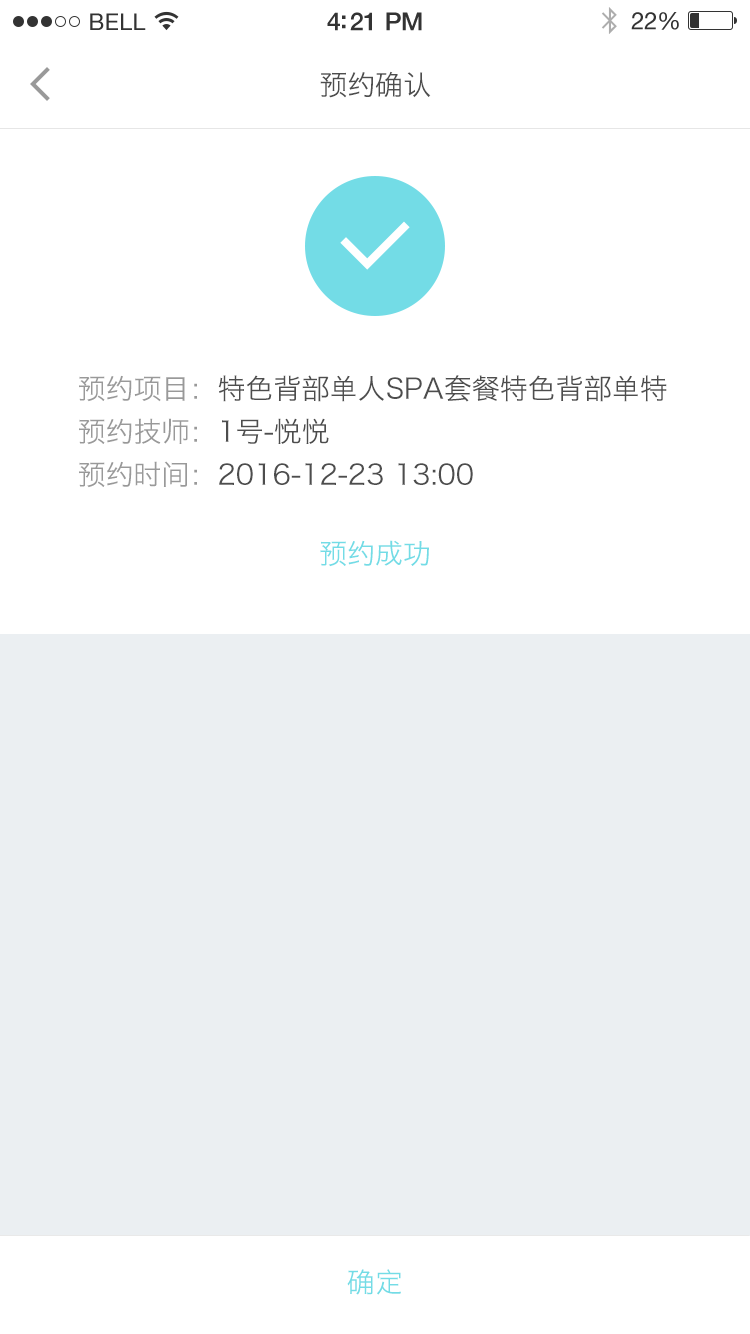
<style>
.page{position:relative;width:750px;height:1334px;background:#ffffff}
.page>*{position:absolute;margin:0}
.t1{font:28px "HiraginoSansGB-W3";color:#4d4d4d}
.t2{font:28px/43px "HiraginoSansGB-W3";color:#4d4d4d}
.t3{font:28px/43px "HiraginoSansGB-W3";color:#999999}
.t4{font:28px "HiraginoSansGB-W3";color:#73dce6}
</style>
<div class="page">
<p class="t1" style="left:320px;top:71px;width:111px;height:27px">预约确认</p>
<p class="t2" style="left:79px;top:375px;width:588px;height:113px;text-align:justify"><span class="t3">预约项目：</span>特色背部单人SPA套餐特色背部单特<br><span class="t3">预约技师：</span>1号-悦悦<br><span class="t3">预约时间：</span>2016-12-23 13:00</p>
<p class="t4" style="left:320px;top:540px;width:109px;height:27px">预约成功</p>
<p class="t4" style="left:347px;top:1269px;width:54px;height:26px">确定</p>
</div>
